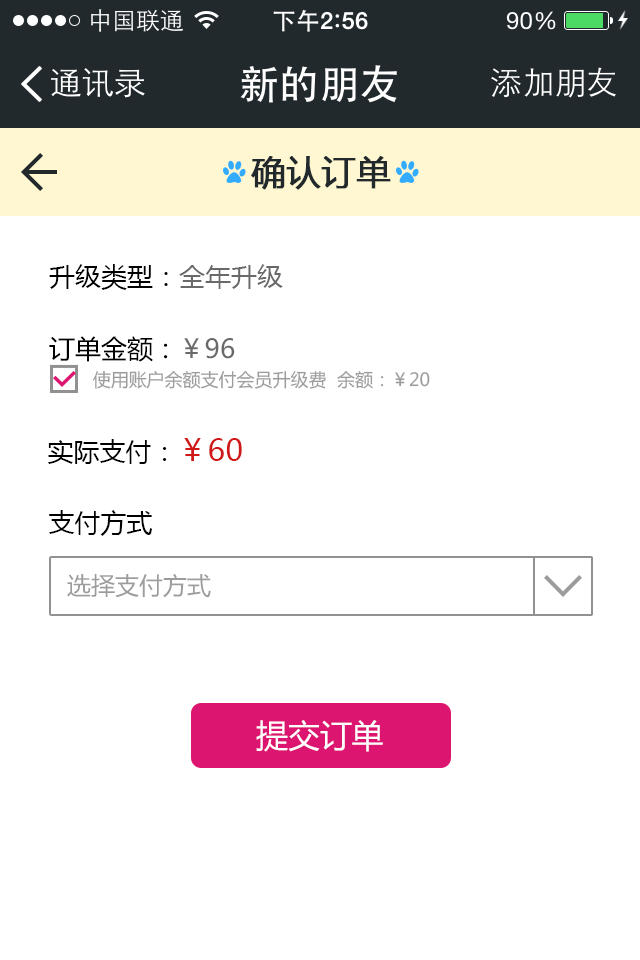
<style>
.page{position:relative;width:640px;height:960px;background:#ffffff}
.page>*{position:absolute;margin:0}
.t1{font:34px "MicrosoftYaHei";color:#22292c;font-weight:bold}
.t2{font:26px "MicrosoftYaHei";color:#000000}
.t3{font:26px "MicrosoftYaHei";color:#696969}
.t4{font:18px "MicrosoftYaHei";color:#9c9c9c}
.t5{font:30px "MicrosoftYaHei";color:#d11818}
.t6{font:24px "MicrosoftYaHei";color:#9c9c9c}
.t7{font:32.4px "MicrosoftYaHei";color:#ffffff}
</style>
<div class="page">
<p class="t1" style="left:251px;top:156px;width:140px;height:34px">确认订单</p>
<p class="t2" style="left:49px;top:264px;width:234px;height:26px">升级类型：<span class="t3">全年升级</span></p>
<p class="t2" style="left:49px;top:336px;width:186px;height:26px">订单金额：<span class="t3">￥96</span></p>
<p class="t4" style="left:93px;top:370px;width:337px;height:19px">使用账户余额支付会员升级费  余额：￥20</p>
<p class="t2" style="left:48px;top:438px;width:194px;height:26px">实际支付：<span class="t5">￥60</span></p>
<p class="t2" style="left:49px;top:510px;width:104px;height:26px">支付方式</p>
<p class="t6" style="left:67px;top:574px;width:144px;height:24px">选择支付方式</p>
<p class="t7" style="left:256px;top:720px;width:127px;height:32px">提交订单</p>
</div>
